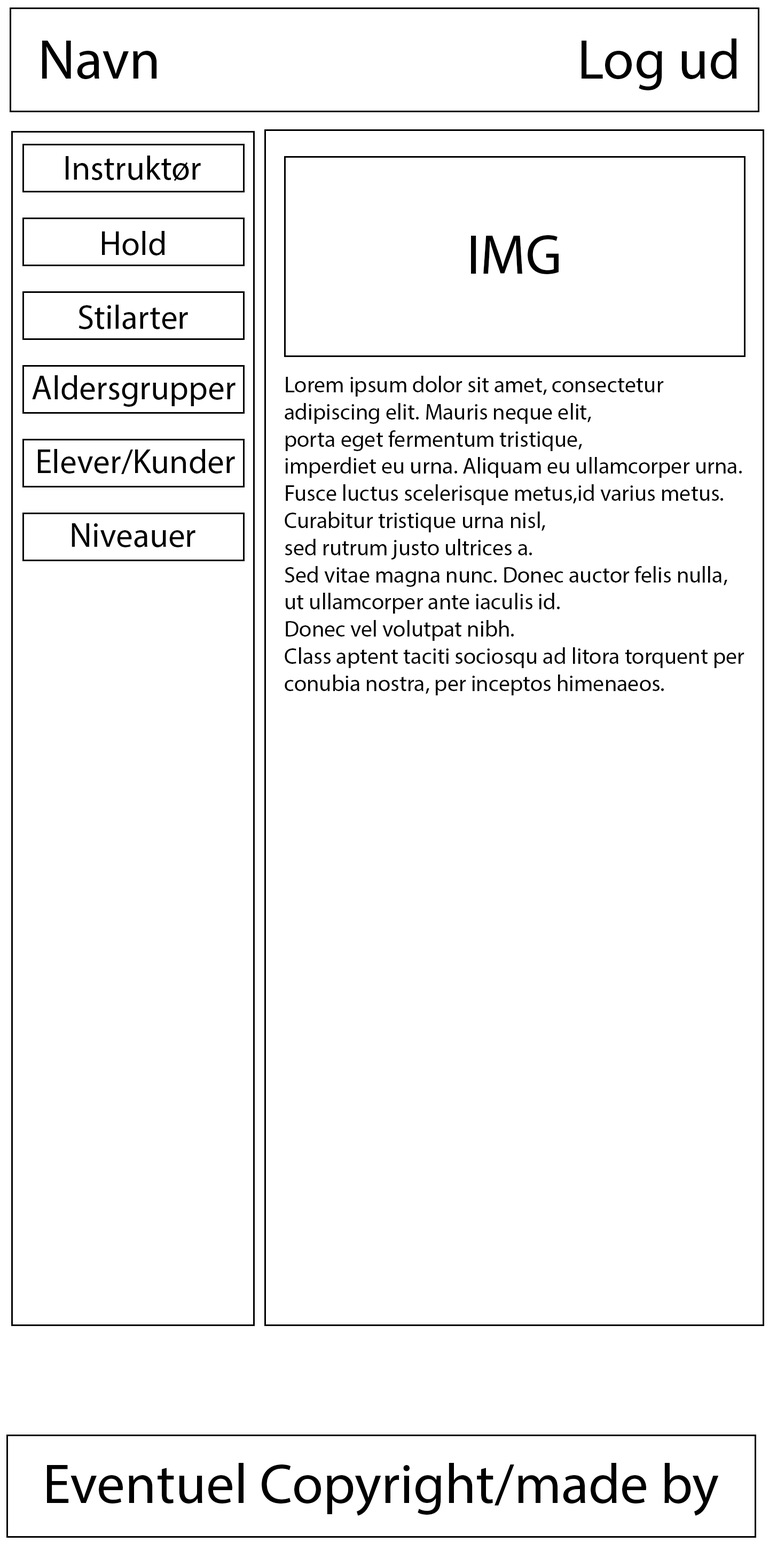
<style>
.page{position:relative;width:769px;height:1550px;background:#ffffff}
.page>*{position:absolute;margin:0}
.t1{font:56.6px "MyriadPro-Regular";color:#000000}
.t2{font:33.9px "MyriadPro-Regular";color:#000000}
.t3{font:22.6px "MyriadPro-Regular";color:#000000}
</style>
<div class="page">
<p class="t1" style="left:42px;top:41px;width:115px;height:39px">Navn</p>
<p class="t1" style="left:582px;top:38px;width:155px;height:52px">Log ud</p>
<p class="t2" style="left:66px;top:155px;width:135px;height:26px">Instruktør</p>
<p class="t2" style="left:102px;top:231px;width:63px;height:24px">Hold</p>
<p class="t1" style="left:471px;top:235px;width:88px;height:39px">IMG</p>
<p class="t2" style="left:79px;top:305px;width:109px;height:24px">Stilarter</p>
<p class="t2" style="left:32px;top:375px;width:204px;height:32px">Aldersgrupper</p>
<p class="t3" style="left:285px;top:376px;width:460px;height:319px">Lorem ipsum dolor sit amet, consectetur<br>adipiscing elit. Mauris neque elit, <br>porta eget fermentum tristique, <br>imperdiet eu urna. Aliquam eu ullamcorper urna.<br>Fusce luctus scelerisque metus,id varius metus. <br>Curabitur tristique urna nisl, <br>sed rutrum justo ultrices a.<br>Sed vitae magna nunc. Donec auctor felis nulla,<br>ut ullamcorper ante iaculis id. <br>Donec vel volutpat nibh.<br>Class aptent taciti sociosqu ad litora torquent per<br>conubia nostra, per inceptos himenaeos.</p>
<p class="t2" style="left:38px;top:449px;width:197px;height:25px">Elever/Kunder</p>
<p class="t2" style="left:72px;top:523px;width:124px;height:24px">Niveauer</p>
<p class="t1" style="left:47px;top:1463px;width:672px;height:52px">Eventuel Copyright/made by</p>
</div>
